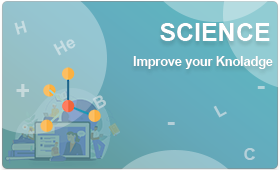
<style>
.page{position:relative;width:280px;height:170px}
.page>*{position:absolute;margin:0}
.t1{font:16.7px "Arial-BoldMT";color:#c6dde2}
.t2{font:25px "Arial-BoldMT";color:#ffffff}
.t3{font:16.7px "Arial-BoldMT";color:#c6dde3}
.t4{font:12.5px "Arial-BoldMT";color:#ffffff}
.t5{font:25px "Arial-BoldMT";color:#c6d9dc}
.t6{font:25px "Arial-BoldMT";color:#b2d4da}
.t7{font:16.7px "Arial-BoldMT";color:#b6cfd8}
.t8{font:16.7px "Arial-BoldMT";color:#b3d1da}
.t9{font:25px "Arial-BoldMT";color:#b4cfd8}
.t10{font:16.7px "Arial-BoldMT";color:#b4d1da}
</style>
<div class="page">
<p class="t1" style="left:14px;top:20px;width:13px;height:15px;rotate:-16deg">H</p>
<p class="t2" style="left:160px;top:23px;width:110px;height:18px">SCIENCE</p>
<p class="t3" style="left:53px;top:39px;width:23px;height:17px;rotate:-29deg">He</p>
<p class="t4" style="left:133px;top:56px;width:140px;height:13px">Improve your Knoladge</p>
<p class="t5" style="left:16px;top:84px;width:13px;height:13px">+</p>
<p class="t6" style="left:257px;top:86px;width:8px;height:3px">-</p>
<p class="t7" style="left:92px;top:95px;width:14px;height:15px;rotate:-29deg">B</p>
<p class="t8" style="left:213px;top:105px;width:14px;height:13px;rotate:-29deg">L</p>
<p class="t9" style="left:167px;top:122px;width:8px;height:3px">-</p>
<p class="t10" style="left:244px;top:148px;width:11px;height:12px">C</p>
</div>
